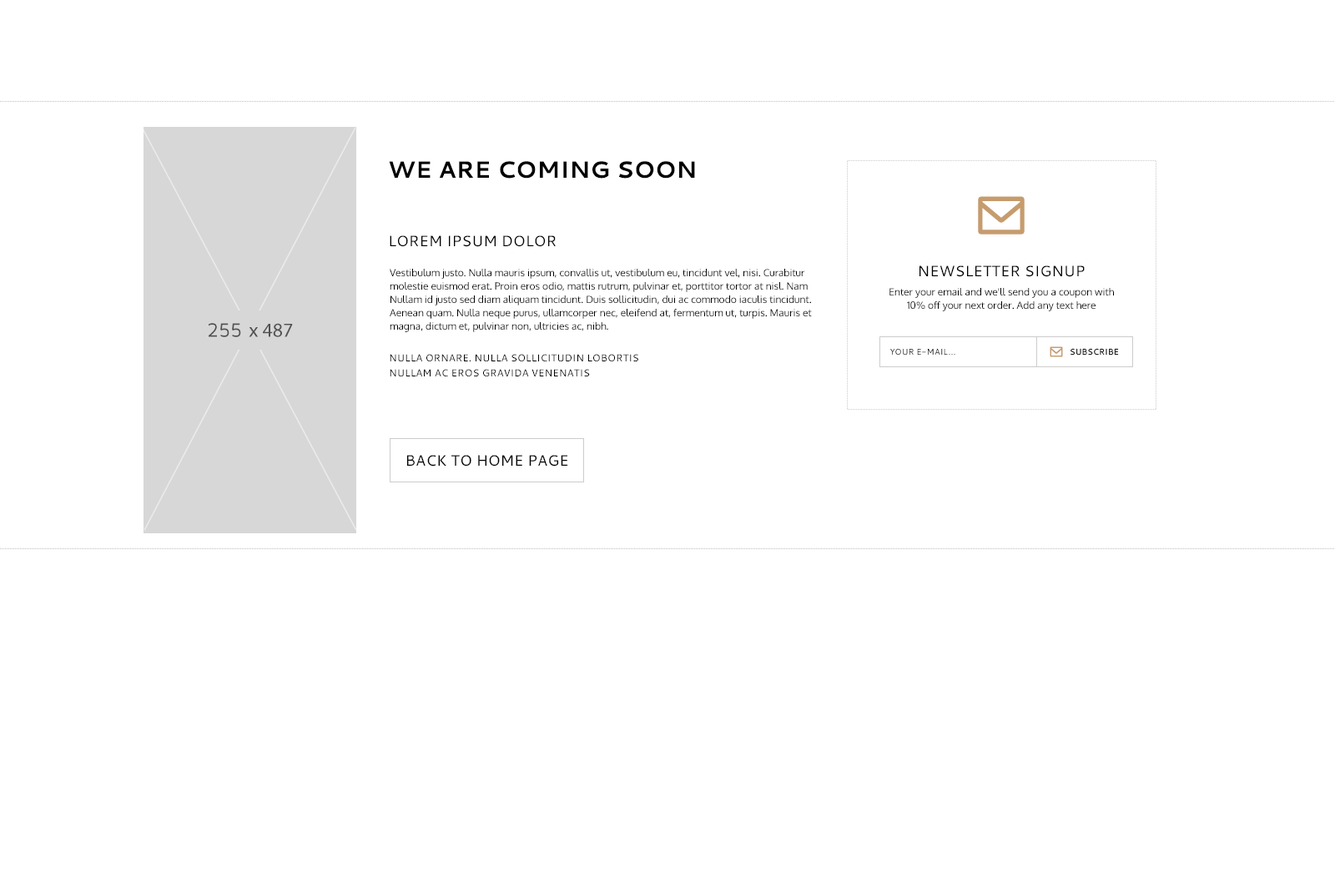
<style>
.page{position:relative;width:1335px;height:893px;background:#ffffff}
.page>*{position:absolute;margin:0}
.t1{font:23.4px "Cantarell-Bold";color:#000000;text-transform:uppercase}
.t2{font:15px "Cantarell-Regular";color:#000000;text-transform:uppercase}
.t3{font:10px/13.4px "Oxygen-Regular";color:#000000}
.t4{font:10px/15px "Cantarell-Regular";color:#000000;text-transform:uppercase}
.t5{font:8.3px "Cantarell-Regular";color:#000000;text-transform:uppercase}
.t6{font:8.3px "Cantarell-Regular";text-transform:uppercase}
</style>
<div class="page">
<p class="t1" style="left:389px;top:161px;width:306px;height:18px">WE ARE COMING SOON</p>
<p class="t2" style="left:390px;top:235px;width:166px;height:12px">Lorem ipsum dolor</p>
<p class="t3" style="left:390px;top:269px;width:422px;height:63px">Vestibulum justo. Nulla mauris ipsum, convallis ut, vestibulum eu, tincidunt vel, nisi. Curabitur molestie euismod erat. Proin eros odio, mattis rutrum, pulvinar et, porttitor tortor at nisl. Nam Nullam id justo sed diam aliquam tincidunt. Duis sollicitudin, dui ac commodo iaculis tincidunt.<br>Aenean quam. Nulla neque purus, ullamcorper nec, eleifend at, fermentum ut, turpis. Mauris et magna, dictum et, pulvinar non, ultricies ac, nibh.</p>
<p class="t2" style="left:920px;top:265px;width:165px;height:12px">NEWSLETTER SIGNUP</p>
<p class="t3" style="left:890px;top:288px;width:224px;height:23px;text-align:center">Enter your email and we'll send you a coupon with<br>10% off your next order. Add any text here</p>
<p class="t4" style="left:390px;top:354px;width:248px;height:22px">Nulla ornare. Nulla sollicitudin lobortis  <br>Nullam ac eros gravida venenatis</p>
<p class="t5" style="left:890px;top:349px;width:66px;height:6px">Your E-mail...</p>
<p class="t6" style="left:1071px;top:348px;width:48px;height:8px">subscribe</p>
<p class="t2" style="left:406px;top:455px;width:162px;height:12px">BACK TO HOME PAGE</p>
</div>
